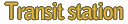
<style>
.page{position:relative;width:128px;height:24px;background:#ffffff}
.page>*{position:absolute;margin:0}
.t1{font:22px "BellGothicStd-Bold";letter-spacing:-0.05em;color:#e5b743}
</style>
<div class="page">
<p class="t1" style="left:5px;top:2px;width:118px;height:18px">Transit station</p>
</div>
